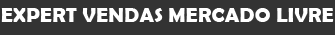
<style>
.page{position:relative;width:335px;height:35px;background:#333333}
.page>*{position:absolute;margin:0}
.t1{font:21.3px "BerlinSansFBDemi-Bold";color:#ffffff}
</style>
<div class="page">
<p class="t1" style="left:1px;top:8px;width:333px;height:14px">EXPERT VENDAS MERCADO LIVRE</p>
</div>
